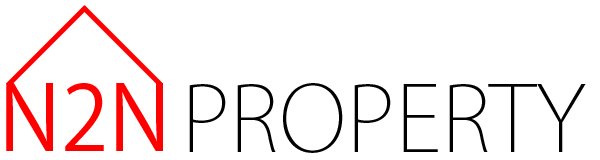
<style>
.page{position:relative;width:600px;height:160px;background:#ffffff}
.page>*{position:absolute;margin:0}
.t1{font:89.8px "KozGoPro-Regular";color:#ff0000}
.t2{font:89.8px "KozGoPro-ExtraLight";color:#000000}
</style>
<div class="page">
<p class="t1" style="left:6px;top:83px;width:157px;height:68px">N2N</p>
<p class="t2" style="left:189px;top:83px;width:397px;height:70px">PROPERTY</p>
</div>
